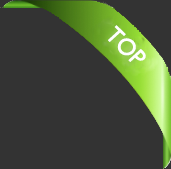
<style>
.page{position:relative;width:171px;height:169px;background:#333333}
.page>*{position:absolute;margin:0}
.t1{font:23.7px "Railway";letter-spacing:0.02em;color:#ffffff}
</style>
<div class="page">
<p class="t1" style="left:108px;top:25px;width:38px;height:37px;rotate:44deg">TOP</p>
</div>
